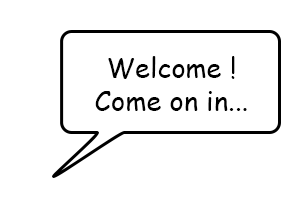
<style>
.page{position:relative;width:308px;height:203px;background:#ffffff}
.page>*{position:absolute;margin:0}
.t1{font:27.2px "ComicSansMS";color:#000000}
</style>
<div class="page">
<p class="t1" style="left:95px;top:56px;width:152px;height:55px;text-align:center">Welcome !<br>Come on in...</p>
</div>
